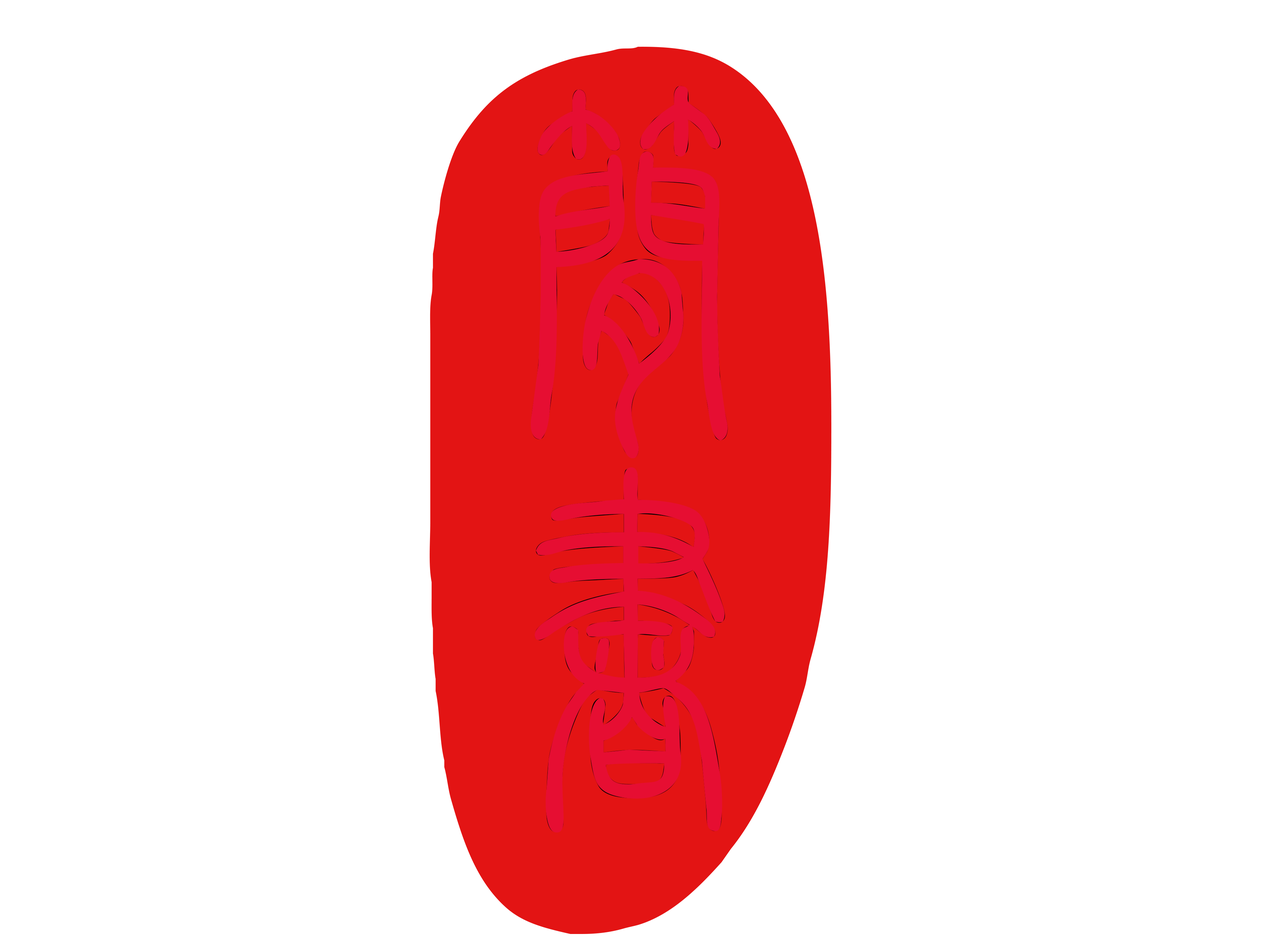
<style>
.page{position:relative;width:1261px;height:946px;background:#ffffff}
.page>*{position:absolute;margin:0}
.t1{font:375.3px "FZuanSu";color:#e60e32}
</style>
<div class="page">
<p class="t1" style="left:531px;top:86px;width:197px;height:372px">简</p>
<p class="t1" style="left:535px;top:467px;width:190px;height:365px">书</p>
</div>
